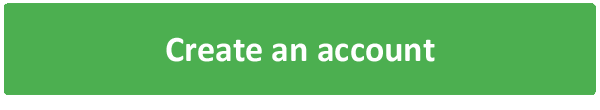
<style>
.page{position:relative;width:600px;height:110px;background:#4caf50}
.page>*{position:absolute;margin:0}
.t1{font:36px "Calibri-Bold";color:#ffffff}
</style>
<div class="page">
<p class="t1" style="left:166px;top:37px;width:269px;height:25px">Create an account</p>
</div>
